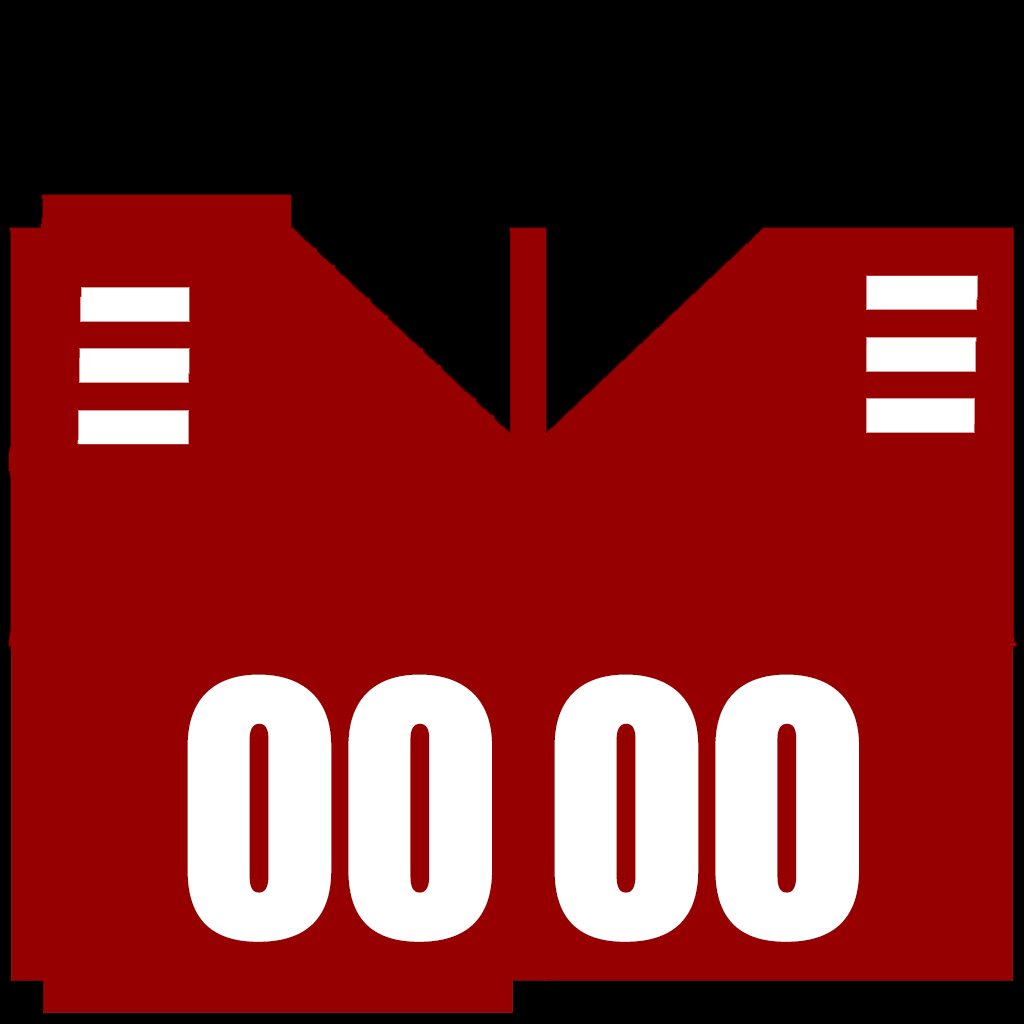
<style>
.page{position:relative;width:1024px;height:1024px;background:#970000}
.page>*{position:absolute;margin:0}
.t1{font:400px "AcuminConcept-ExtraCondensedUltraBlack";color:#ffffff}
</style>
<div class="page">
<p class="t1" style="left:187px;top:674px;width:305px;height:268px">00</p>
<p class="t1" style="left:554px;top:674px;width:305px;height:268px">00</p>
</div>
